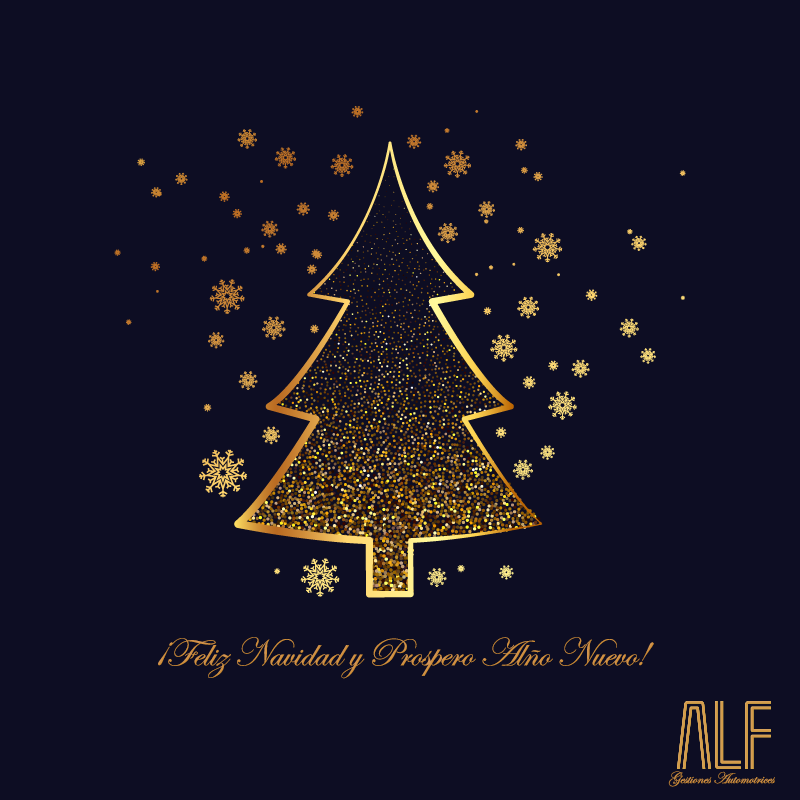
<style>
.page{position:relative;width:800px;height:800px;background:#0d0d23}
.page>*{position:absolute;margin:0}
.t1{font:40px "EdwardianScriptITC";color:#d09041}
.t2{font:16px "EdwardianScriptITC";color:#cf9040}
</style>
<div class="page">
<p class="t1" style="left:158px;top:637px;width:496px;height:42px">¡Feliz Navidad y Prospero Alño Nuevo!</p>
<p class="t2" style="left:668px;top:771px;width:107px;height:16px">Gestiones Automotrices</p>
</div>
